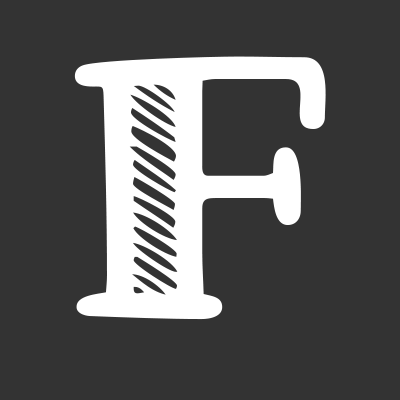
<style>
.page{position:relative;width:400px;height:400px;background:#333333}
.page>*{position:absolute;margin:0}
.t1{font:341.7px "Paperkind";color:#ffffff}
</style>
<div class="page">
<p class="t1" style="left:74px;top:56px;width:252px;height:264px">f</p>
</div>
